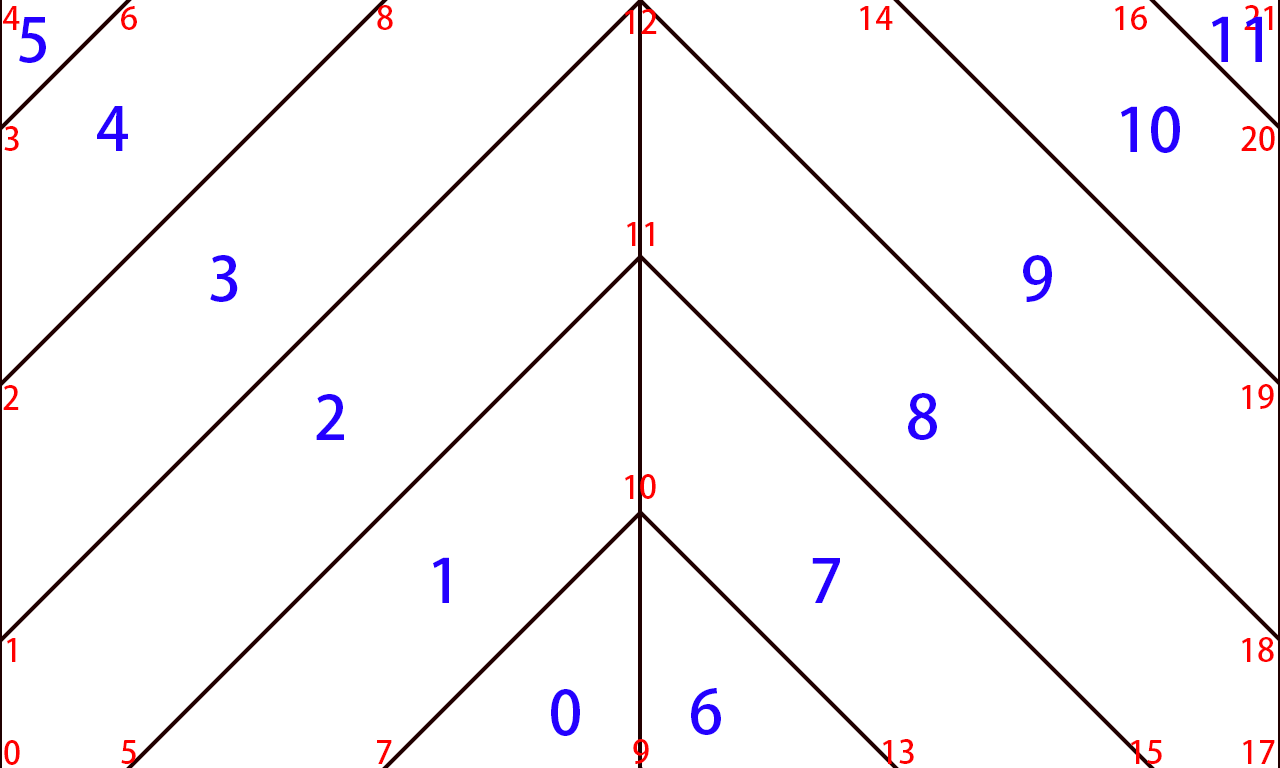
<style>
.page{position:relative;width:1280px;height:768px;background:#ffffff}
.page>*{position:absolute;margin:0}
.t1{font:32px "AdobeHeitiStd-Regular";color:#ff0000}
.t2{font:60px "AdobeHeitiStd-Regular";color:#2400ff}
</style>
<div class="page">
<p class="t1" style="left:3px;top:6px;width:17px;height:24px">4</p>
<p class="t1" style="left:121px;top:6px;width:16px;height:24px">6</p>
<p class="t1" style="left:377px;top:5px;width:16px;height:25px">8</p>
<p class="t1" style="left:860px;top:6px;width:33px;height:24px">14</p>
<p class="t1" style="left:1115px;top:6px;width:32px;height:24px">16</p>
<p class="t1" style="left:1244px;top:5px;width:29px;height:25px">21</p>
<p class="t2" style="left:19px;top:17px;width:27px;height:46px">5</p>
<p class="t1" style="left:625px;top:9px;width:32px;height:25px">12</p>
<p class="t2" style="left:1212px;top:16px;width:50px;height:46px">11</p>
<p class="t2" style="left:97px;top:106px;width:31px;height:45px">4</p>
<p class="t2" style="left:1121px;top:106px;width:59px;height:47px">10</p>
<p class="t1" style="left:4px;top:126px;width:15px;height:25px">3</p>
<p class="t1" style="left:1241px;top:126px;width:34px;height:25px">20</p>
<p class="t1" style="left:627px;top:222px;width:27px;height:24px">11</p>
<p class="t2" style="left:210px;top:255px;width:28px;height:47px">3</p>
<p class="t2" style="left:1023px;top:255px;width:29px;height:47px">9</p>
<p class="t1" style="left:3px;top:385px;width:16px;height:25px">2</p>
<p class="t1" style="left:1242px;top:384px;width:32px;height:25px">19</p>
<p class="t2" style="left:316px;top:394px;width:28px;height:46px">2</p>
<p class="t2" style="left:908px;top:393px;width:29px;height:47px">8</p>
<p class="t1" style="left:625px;top:474px;width:31px;height:25px">10</p>
<p class="t2" style="left:433px;top:557px;width:16px;height:46px">1</p>
<p class="t2" style="left:812px;top:558px;width:28px;height:45px">7</p>
<p class="t1" style="left:7px;top:638px;width:9px;height:24px">1</p>
<p class="t1" style="left:1242px;top:637px;width:32px;height:25px">18</p>
<p class="t2" style="left:551px;top:689px;width:29px;height:47px">0</p>
<p class="t2" style="left:691px;top:688px;width:30px;height:47px">6</p>
<p class="t1" style="left:4px;top:740px;width:16px;height:25px">0</p>
<p class="t1" style="left:121px;top:740px;width:15px;height:24px">5</p>
<p class="t1" style="left:377px;top:740px;width:15px;height:24px">7</p>
<p class="t1" style="left:633px;top:739px;width:16px;height:25px">9</p>
<p class="t1" style="left:883px;top:739px;width:31px;height:25px">13</p>
<p class="t1" style="left:1131px;top:740px;width:31px;height:24px">15</p>
<p class="t1" style="left:1243px;top:740px;width:32px;height:24px">17</p>
</div>
